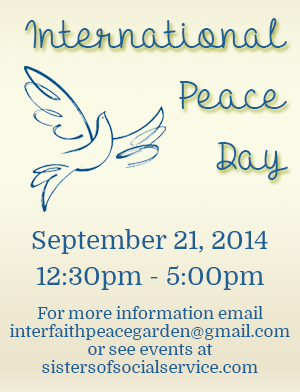
<style>
.page{position:relative;width:300px;height:392px}
.page>*{position:absolute;margin:0}
.t1{font:40px/45px "HelloHeartache";color:#1d6096}
.t2{font:17px/18px "Domine-Regular";color:#1d6096}
.t3{font:26px/20px "Domine-Regular";color:#1d6096}
</style>
<div class="page">
<p class="t1" style="left:25px;top:18px;width:263px;height:162px;text-align:right">International<br>Peace<br>Day</p>
<p class="t2" style="left:10px;top:229px;width:280px;height:144px;text-align:center"><span class="t3">September 21, 2014<br>12:30pm - 5:00pm<br></span>For more information email interfaithpeacegarden@gmail.com or see events at sistersofsocialservice.com</p>
</div>
